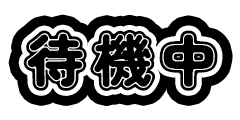
<style>
.page{position:relative;width:240px;height:120px;background:#ffffff}
.page>*{position:absolute;margin:0}
.t1{font:66.7px "DokiDokiFantasia";color:#000000}
</style>
<div class="page">
<p class="t1" style="left:23px;top:29px;width:195px;height:62px">待機中</p>
</div>
